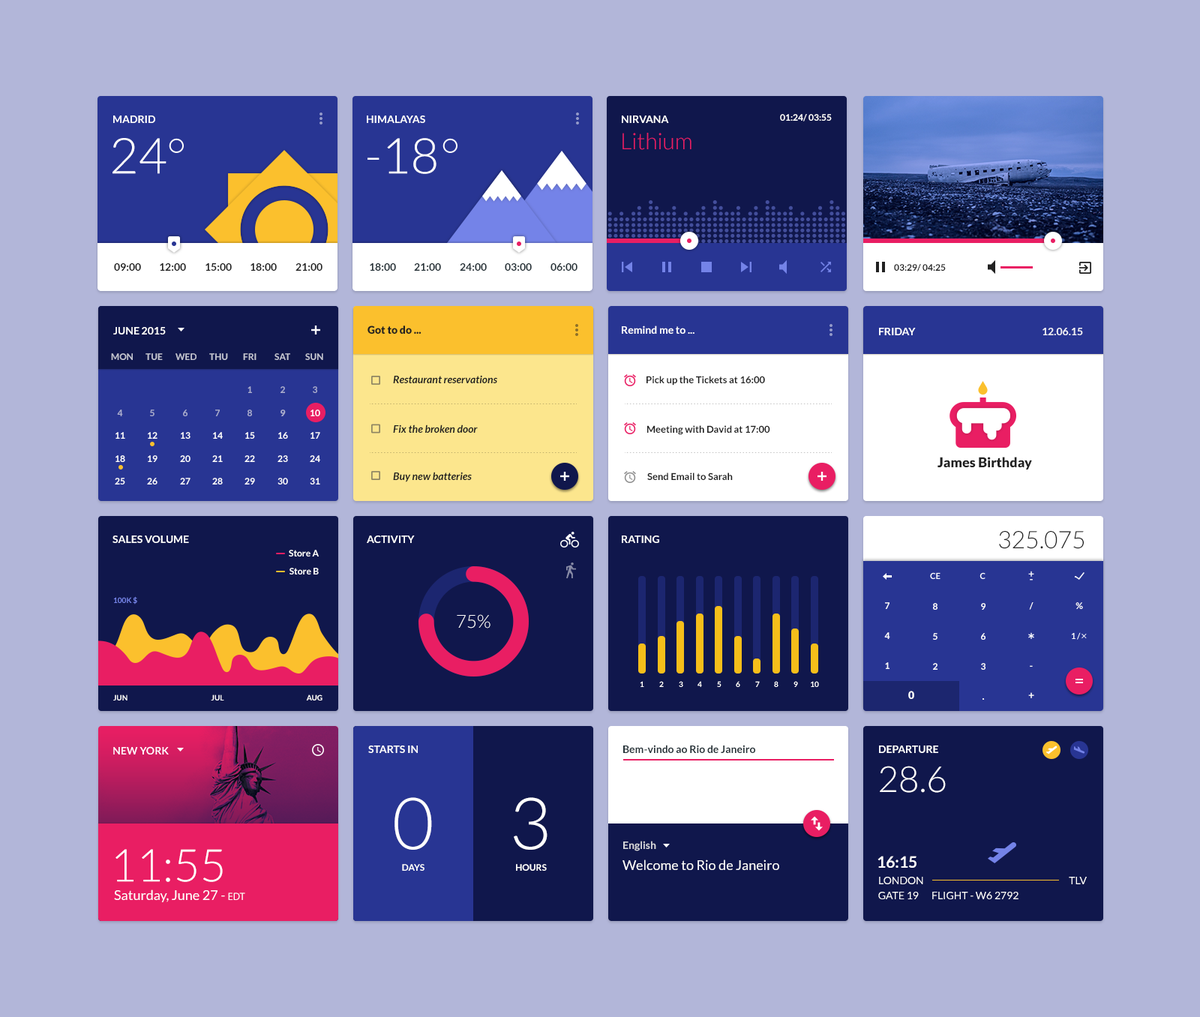
<style>
.page{position:relative;width:1200px;height:1017px;background:#b2b6d9}
.page>*{position:absolute;margin:0}
.t1{font:10.5px "Lato-Bold";color:#ffffff}
.t2{font:10.5px "MyriadPro-Regular";color:#ffffff}
.t3{font:9px "Lato-Bold";color:#ffffff}
.t4{font:22.5px "Lato-Light";color:#e91e63}
.t5{font:49.5px "Lato-Light";color:#ffffff}
.t6{font:49.3px "Lato-Light";color:#ffffff}
.t7{font:10.5px "Lato-Bold";color:#212121}
.t8{font:10.5px "Lato-Bold";color:#263238}
.t9{font:9px "Lato-Bold";color:#212121}
.t10{font:10.5px "Lato-Black";color:#212121}
.t11{font:9px "Lato-Bold";color:#c3c5d2}
.t12{font:10.5px "Lato-BoldItalic";color:#212121}
.t13{font:9.8px "Lato-Bold";color:#212121}
.t14{font:9px "Lato-Bold";color:#abaece}
.t15{font:9px "Lato-Black";color:#abaece}
.t16{font:13.5px "Lato-Black";color:#212121}
.t17{font:24px "Lato-Light";color:#212121}
.t18{font:7.5px "Lato-Bold";color:#7483e8}
.t19{font:18px "Lato-Light";color:#ffffff}
.t20{font:7.5px "Lato-Bold";color:#ffffff}
.t21{font:10.5px "Lato-Black";color:#ffffff}
.t22{font:10.5px "Lato-Bold"}
.t23{font:36px "Lato-Light";color:#ffffff}
.t24{font:72px "Lato-Light";color:#ffffff}
.t25{font:10.5px "Lato-Bold";color:#d5d6db}
.t26{font:45px "Lato-Light";color:#ffffff}
.t27{font:15.8px "Lato-Bold";color:#ffffff}
.t28{font:13.5px "Lato-Regular";color:#ffffff}
.t29{font:10.5px "Lato-Regular";color:#ffffff}
</style>
<div class="page">
<p class="t1" style="left:113px;top:116px;width:42px;height:7px">MADRID</p>
<p class="t1" style="left:367px;top:116px;width:58px;height:7px">HIMALAYAS<span class="t2">‬‏</span></p>
<p class="t1" style="left:622px;top:116px;width:47px;height:7px">NIRVANA</p>
<p class="t3" style="left:780px;top:114px;width:52px;height:8px">01:24/ 03:55</p>
<p class="t4" style="left:622px;top:133px;width:70px;height:17px">Lithium</p>
<p class="t5" style="left:112px;top:138px;width:54px;height:36px">24</p>
<p class="t6" style="left:368px;top:138px;width:68px;height:36px">-18</p>
<p class="t7" style="left:114px;top:263px;width:27px;height:8px">09:00</p>
<p class="t7" style="left:160px;top:263px;width:26px;height:8px">12:00</p>
<p class="t7" style="left:206px;top:263px;width:26px;height:8px">15:00</p>
<p class="t7" style="left:250px;top:263px;width:27px;height:8px">18:00</p>
<p class="t7" style="left:296px;top:263px;width:26px;height:8px">21:00</p>
<p class="t8" style="left:370px;top:263px;width:26px;height:8px">18:00</p>
<p class="t8" style="left:414px;top:263px;width:27px;height:8px">21:00</p>
<p class="t8" style="left:460px;top:263px;width:27px;height:8px">24:00</p>
<p class="t8" style="left:505px;top:263px;width:27px;height:8px">03:00</p>
<p class="t8" style="left:550px;top:263px;width:28px;height:8px">06:00</p>
<p class="t9" style="left:894px;top:264px;width:52px;height:8px">03:29/ 04:25</p>
<p class="t1" style="left:113px;top:327px;width:53px;height:7px">JUNE 2015</p>
<p class="t10" style="left:368px;top:326px;width:54px;height:8px">Got to do ...</p>
<p class="t1" style="left:622px;top:326px;width:72px;height:8px">Remind me to ...</p>
<p class="t1" style="left:879px;top:328px;width:37px;height:7px">FRIDAY</p>
<p class="t1" style="left:1042px;top:328px;width:41px;height:7px;opacity:0.9">12.06.15</p>
<p class="t11" style="left:111px;top:353px;width:22px;height:7px">MON</p>
<p class="t11" style="left:146px;top:353px;width:17px;height:7px">TUE</p>
<p class="t11" style="left:176px;top:353px;width:20px;height:7px">WED</p>
<p class="t11" style="left:209px;top:353px;width:19px;height:7px">THU</p>
<p class="t11" style="left:243px;top:353px;width:13px;height:7px">FRI</p>
<p class="t11" style="left:274px;top:353px;width:16px;height:7px">SAT</p>
<p class="t11" style="left:305px;top:353px;width:18px;height:7px">SUN</p>
<p class="t12" style="left:393px;top:375px;width:104px;height:8px">Restaurant reservations</p>
<p class="t13" style="left:646px;top:376px;width:119px;height:10px">Pick up the Tickets at 16:00</p>
<p class="t14" style="left:248px;top:386px;width:4px;height:7px">1</p>
<p class="t14" style="left:280px;top:386px;width:5px;height:7px">2</p>
<p class="t14" style="left:313px;top:386px;width:4px;height:7px">3</p>
<p class="t14" style="left:117px;top:410px;width:6px;height:6px">4</p>
<p class="t14" style="left:150px;top:410px;width:4px;height:6px">5</p>
<p class="t14" style="left:183px;top:410px;width:5px;height:6px">6</p>
<p class="t14" style="left:215px;top:410px;width:5px;height:6px">7</p>
<p class="t14" style="left:248px;top:410px;width:4px;height:6px">8</p>
<p class="t15" style="left:280px;top:410px;width:6px;height:6px">9</p>
<p class="t3" style="left:310px;top:410px;width:10px;height:6px">10</p>
<p class="t12" style="left:393px;top:424px;width:85px;height:9px">Fix the broken door</p>
<p class="t13" style="left:647px;top:425px;width:123px;height:10px">Meeting with David at 17:00</p>
<p class="t3" style="left:116px;top:432px;width:9px;height:7px">11</p>
<p class="t3" style="left:148px;top:432px;width:10px;height:7px">12</p>
<p class="t3" style="left:181px;top:432px;width:9px;height:7px">13</p>
<p class="t3" style="left:213px;top:432px;width:10px;height:7px">14</p>
<p class="t3" style="left:245px;top:432px;width:10px;height:7px">15</p>
<p class="t3" style="left:278px;top:432px;width:10px;height:7px">16</p>
<p class="t3" style="left:310px;top:432px;width:10px;height:7px">17</p>
<p class="t3" style="left:116px;top:455px;width:9px;height:7px">18</p>
<p class="t3" style="left:148px;top:455px;width:10px;height:7px">19</p>
<p class="t3" style="left:180px;top:455px;width:10px;height:7px">20</p>
<p class="t3" style="left:212px;top:455px;width:11px;height:7px">21</p>
<p class="t3" style="left:244px;top:455px;width:11px;height:7px">22</p>
<p class="t3" style="left:278px;top:455px;width:10px;height:7px">23</p>
<p class="t3" style="left:310px;top:455px;width:10px;height:7px">24</p>
<p class="t16" style="left:938px;top:457px;width:94px;height:13px">James Birthday</p>
<p class="t12" style="left:393px;top:472px;width:79px;height:10px">Buy new batteries</p>
<p class="t13" style="left:647px;top:472px;width:86px;height:8px">Send Email to Sarah</p>
<p class="t3" style="left:115px;top:478px;width:10px;height:6px">25</p>
<p class="t3" style="left:147px;top:478px;width:11px;height:6px">26</p>
<p class="t3" style="left:180px;top:478px;width:10px;height:6px">27</p>
<p class="t3" style="left:212px;top:478px;width:11px;height:6px">28</p>
<p class="t3" style="left:244px;top:478px;width:11px;height:6px">29</p>
<p class="t3" style="left:278px;top:478px;width:10px;height:6px">30</p>
<p class="t3" style="left:310px;top:478px;width:10px;height:6px">31</p>
<p class="t17" style="left:999px;top:531px;width:85px;height:18px">325.075</p>
<p class="t1" style="left:112px;top:536px;width:77px;height:7px">SALES VOLUME<span class="t2">‬</span>‏</p>
<p class="t1" style="left:367px;top:536px;width:48px;height:7px">ACTIVITY</p>
<p class="t1" style="left:622px;top:536px;width:37px;height:7px">RATING</p>
<p class="t3" style="left:289px;top:550px;width:30px;height:6px">Store A</p>
<p class="t3" style="left:290px;top:568px;width:29px;height:6px">Store B</p>
<p class="t18" style="left:113px;top:596px;width:24px;height:8px">100K $</p>
<p class="t3" style="left:885px;top:602px;width:5px;height:7px">7</p>
<p class="t3" style="left:933px;top:603px;width:5px;height:7px">8</p>
<p class="t3" style="left:981px;top:603px;width:5px;height:7px">9</p>
<p class="t3" style="left:1029px;top:602px;width:5px;height:8px">/</p>
<p class="t3" style="left:1076px;top:602px;width:7px;height:7px">%</p>
<p class="t19" style="left:457px;top:614px;width:33px;height:14px">75%</p>
<p class="t3" style="left:884px;top:632px;width:6px;height:7px">4</p>
<p class="t3" style="left:933px;top:633px;width:5px;height:7px">5</p>
<p class="t3" style="left:981px;top:633px;width:5px;height:7px">6</p>
<p class="t3" style="left:885px;top:662px;width:5px;height:7px">1</p>
<p class="t3" style="left:933px;top:663px;width:5px;height:7px">2</p>
<p class="t3" style="left:981px;top:663px;width:5px;height:7px">3</p>
<p class="t3" style="left:1030px;top:665px;width:3px;height:2px">-</p>
<p class="t20" style="left:640px;top:681px;width:4px;height:6px">1</p>
<p class="t20" style="left:659px;top:681px;width:5px;height:6px">2</p>
<p class="t20" style="left:679px;top:681px;width:4px;height:6px">3</p>
<p class="t20" style="left:698px;top:681px;width:4px;height:6px">4</p>
<p class="t20" style="left:717px;top:681px;width:5px;height:6px">5</p>
<p class="t20" style="left:736px;top:681px;width:4px;height:6px">6</p>
<p class="t20" style="left:755px;top:681px;width:5px;height:6px">7</p>
<p class="t20" style="left:774px;top:681px;width:4px;height:6px">8</p>
<p class="t20" style="left:794px;top:681px;width:4px;height:6px">9</p>
<p class="t20" style="left:811px;top:681px;width:8px;height:6px">10</p>
<p class="t20" style="left:113px;top:694px;width:15px;height:6px">JUN</p>
<p class="t20" style="left:211px;top:694px;width:13px;height:6px">JUL</p>
<p class="t20" style="left:306px;top:694px;width:16px;height:6px">AUG</p>
<p class="t21" style="left:908px;top:691px;width:6px;height:8px">0</p>
<p class="t22" style="left:982px;top:698px;width:3px;height:2px">.</p>
<p class="t1" style="left:1028px;top:692px;width:6px;height:6px">+</p>
<p class="t1" style="left:113px;top:746px;width:56px;height:8px">NEW YORK</p>
<p class="t1" style="left:368px;top:746px;width:50px;height:7px">STARTS IN</p>
<p class="t8" style="left:623px;top:745px;width:132px;height:8px">Bem-vindo ao Rio de Janeiro</p>
<p class="t1" style="left:879px;top:746px;width:59px;height:7px">DEPARTURE</p>
<p class="t23" style="left:880px;top:766px;width:66px;height:27px">28.6</p>
<p class="t24" style="left:394px;top:797px;width:38px;height:53px">0</p>
<p class="t24" style="left:514px;top:797px;width:34px;height:53px">3</p>
<p class="t25" style="left:623px;top:841px;width:33px;height:10px">English</p>
<p class="t26" style="left:116px;top:849px;width:107px;height:33px">11:55</p>
<p class="t27" style="left:878px;top:856px;width:38px;height:12px">16:15</p>
<p class="t3" style="left:402px;top:864px;width:22px;height:7px">DAYS</p>
<p class="t3" style="left:516px;top:864px;width:31px;height:7px">HOURS</p>
<p class="t28" style="left:622px;top:860px;width:157px;height:11px">Welcome to Rio de Janeiro</p>
<p class="t29" style="left:879px;top:877px;width:44px;height:7px">LONDON</p>
<p class="t29" style="left:1069px;top:877px;width:18px;height:7px">TLV</p>
<p class="t28" style="left:114px;top:890px;width:131px;height:12px">Saturday, June 27 - <span class="t2">EDT</span></p>
<p class="t29" style="left:878px;top:892px;width:41px;height:7px">GATE 19</p>
<p class="t29" style="left:932px;top:892px;width:86px;height:7px">FLIGHT - W6 2792</p>
</div>
